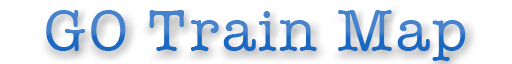
<style>
.page{position:relative;width:512px;height:64px;background:#ffffff}
.page>*{position:absolute;margin:0}
.t1{font:59px "AmericanTypewriter";letter-spacing:0.05em}
</style>
<div class="page">
<p class="t1" style="left:46px;top:10px;width:420px;height:51px">GO Train Map</p>
</div>
